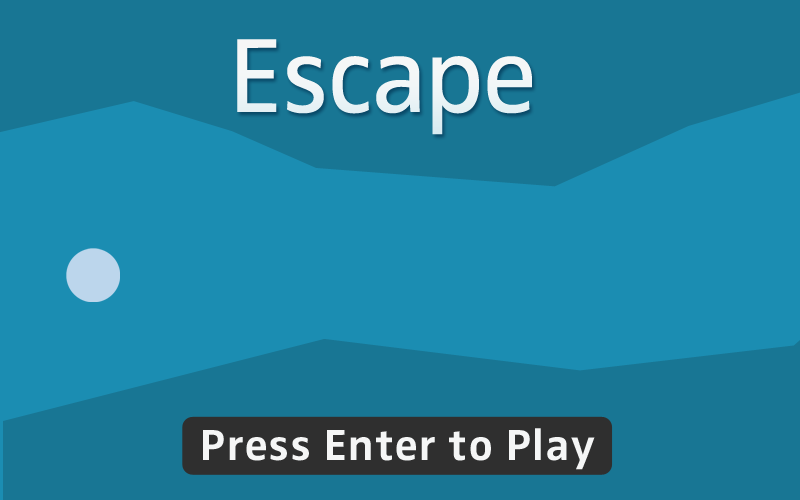
<style>
.page{position:relative;width:800px;height:500px;background:#187694}
.page>*{position:absolute;margin:0}
.t1{font:109px "Zwo-Corr-w-4";color:#f5f6f6}
.t2{font:45px "Zwo-Corr-w-6";color:#f5f6f6}
</style>
<div class="page">
<p class="t1" style="left:237px;top:39px;width:295px;height:96px">Escape</p>
<p class="t2" style="left:203px;top:428px;width:392px;height:42px">Press Enter to Play</p>
</div>
